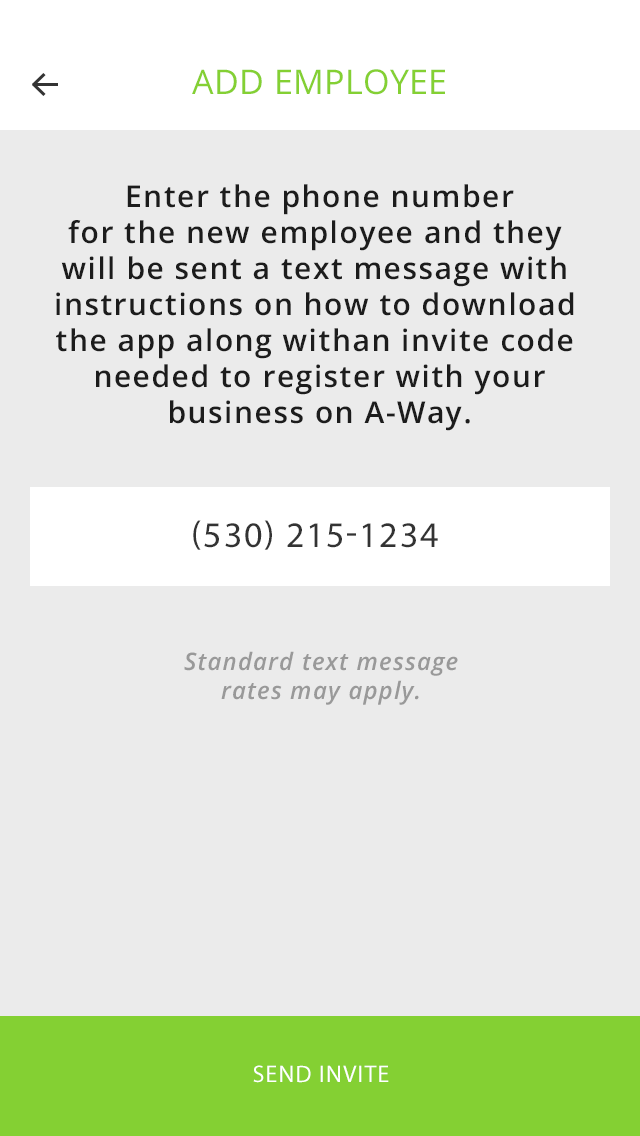
<style>
.page{position:relative;width:640px;height:1136px;background:#ebebeb}
.page>*{position:absolute;margin:0}
.t1{font:34px "OpenSans";letter-spacing:0.01em;color:#84d033}
.t2{font:30px "OpenSans-Semibold";letter-spacing:0.05em;color:#1c1c1c}
.t3{font:36px "MyriadPro-Regular";letter-spacing:0.05em;color:#333333;text-transform:uppercase}
.t4{font:24px "OpenSans-SemiboldItalic";letter-spacing:0.05em;color:#999999}
.t5{font:24px "MyriadPro-Regular";letter-spacing:0.05em;color:#ffffff;text-transform:uppercase}
</style>
<div class="page">
<p class="t1" style="left:192px;top:69px;width:253px;height:26px">ADD EMPLOYEE</p>
<p class="t2" style="left:56px;top:184px;width:518px;height:247px;text-align:center">Enter the phone number<br>for the new employee and they <br>will be sent a text message with <br>instructions on how to download <br>the app along withan invite code <br>needed to register with your<br>business on A-Way.</p>
<p class="t3" style="left:193px;top:520px;width:245px;height:30px">(530) 215-1234</p>
<p class="t4" style="left:184px;top:651px;width:274px;height:54px;text-align:center">Standard text message <br>rates may apply.</p>
<p class="t5" style="left:253px;top:1065px;width:136px;height:18px">SEND INVITE</p>
</div>
